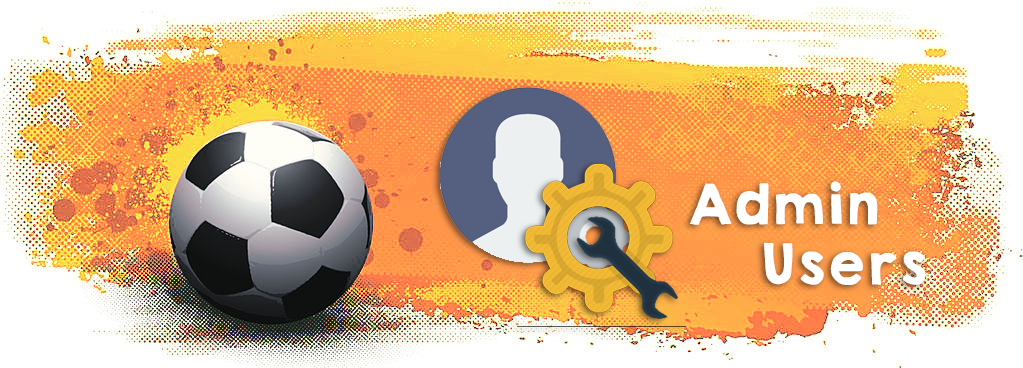
<style>
.page{position:relative;width:1023px;height:368px}
.page>*{position:absolute;margin:0}
.t1{font:50px "KGHAPPYSolid";color:#ffffff}
</style>
<div class="page">
<p class="t1" style="left:690px;top:181px;width:236px;height:104px">Admin<br>  Users</p>
</div>
